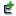
<style>
.page{position:relative;width:16px;height:16px;background:#ffffff}
.page>*{position:absolute;margin:0}
.t1{font:11px "GoodTimes";color:#002740}
</style>
<div class="page">
<p class="t1" style="left:4px;top:5px;width:7px;height:8px">E</p>
</div>
